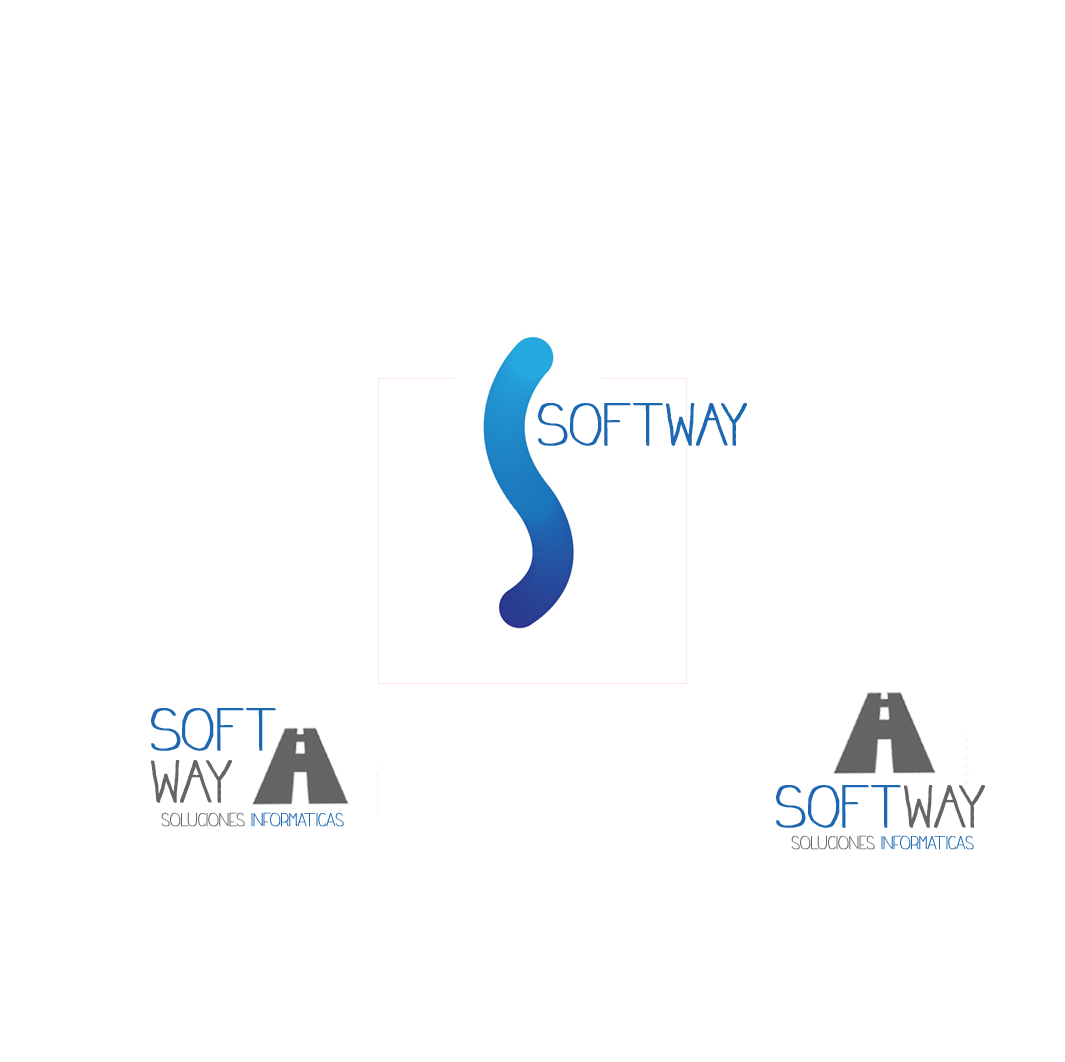
<style>
.page{position:relative;width:1065px;height:1062px;background:#ffffff}
.page>*{position:absolute;margin:0}
.t1{font:60px "Frenchy";color:#1e68b2;font-weight:bold;scale:1.1 1}
.t2{font:60px/52px "Frenchy";color:#1e68b2;font-weight:bold;scale:1.1 1}
.t3{font:60px/52px "Frenchy";color:#656565;font-weight:bold;scale:1.1 1}
.t4{font:60px "Frenchy";color:#656565;font-weight:bold;scale:1.1 1}
.t5{font:18.7px "Frenchy";color:#1e68b2;font-weight:bold;scale:0.97 1}
.t6{font:18.7px "Frenchy";color:#656565;font-weight:bold;scale:0.97 1}
</style>
<div class="page">
<p class="t1" style="left:538px;top:403px;width:209px;height:43px">SOFTWAY</p>
<p class="t2" style="left:151px;top:708px;width:125px;height:95px">SOFT<br><span class="t3">WAY</span></p>
<p class="t1" style="left:776px;top:785px;width:209px;height:43px">SOFT<span class="t4">WAY</span></p>
<p class="t5" style="left:161px;top:812px;width:183px;height:15px"><span class="t6">soluciones </span>informaticas</p>
<p class="t5" style="left:791px;top:835px;width:183px;height:15px"><span class="t6">soluciones </span>informaticas</p>
</div>
